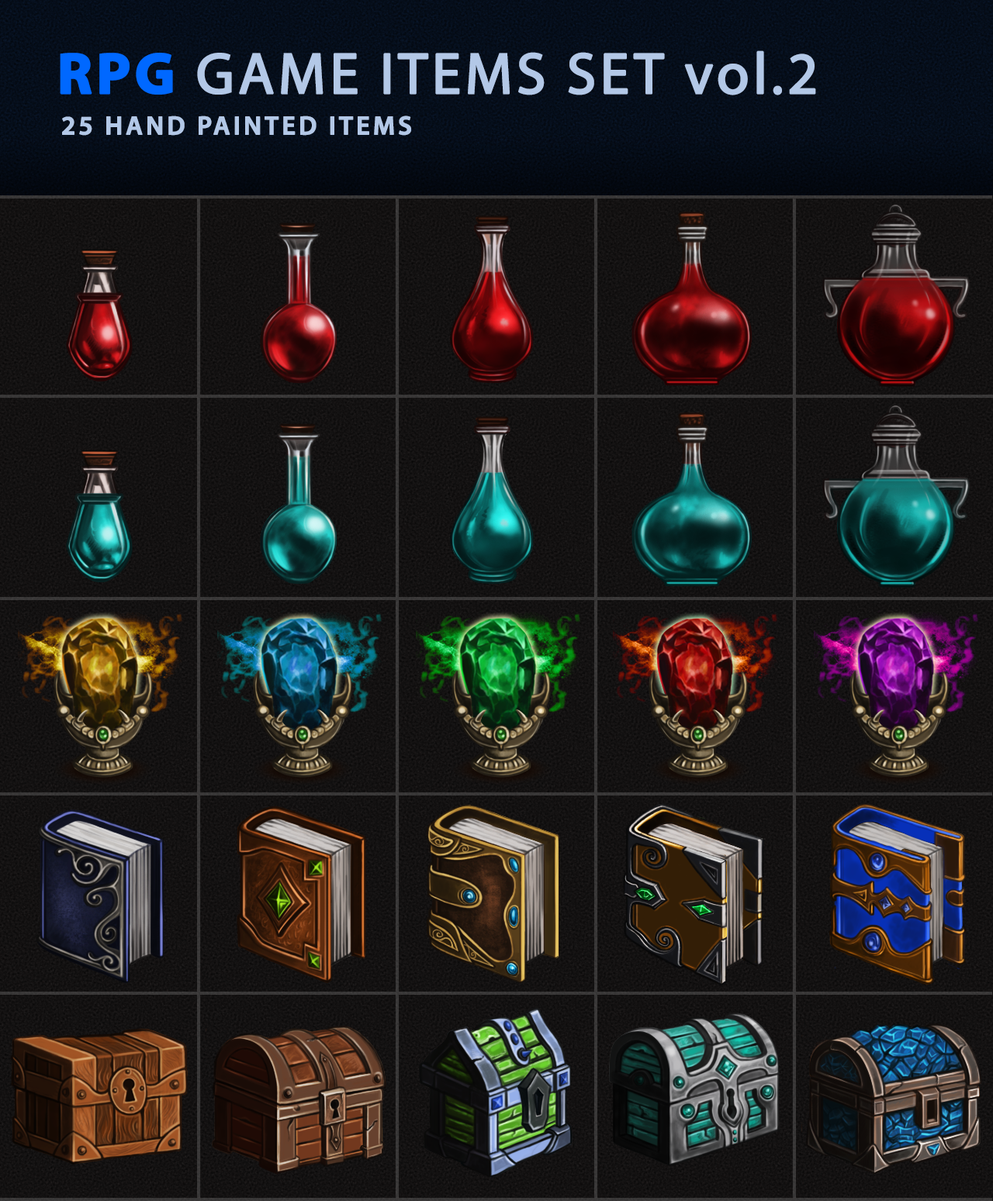
<style>
.page{position:relative;width:993px;height:1201px}
.page>*{position:absolute;margin:0}
.t1{font:58.4px "MyriadPro-Regular";letter-spacing:0.05em;color:#b3c8e7;font-weight:bold}
.t2{font:58.4px "MyriadPro-Bold";letter-spacing:0.05em;color:#0068ff;font-weight:bold}
.t3{font:26.3px "MyriadPro-Semibold";letter-spacing:0.1em;color:#b3c8e7;font-weight:bold}
</style>
<div class="page">
<p class="t1" style="left:60px;top:50px;width:756px;height:45px"><span class="t2">RPG</span> GAME ITEMS SET vol.2</p>
<p class="t3" style="left:62px;top:116px;width:349px;height:20px">25 HAND PAINTED ITEMS</p>
</div>
